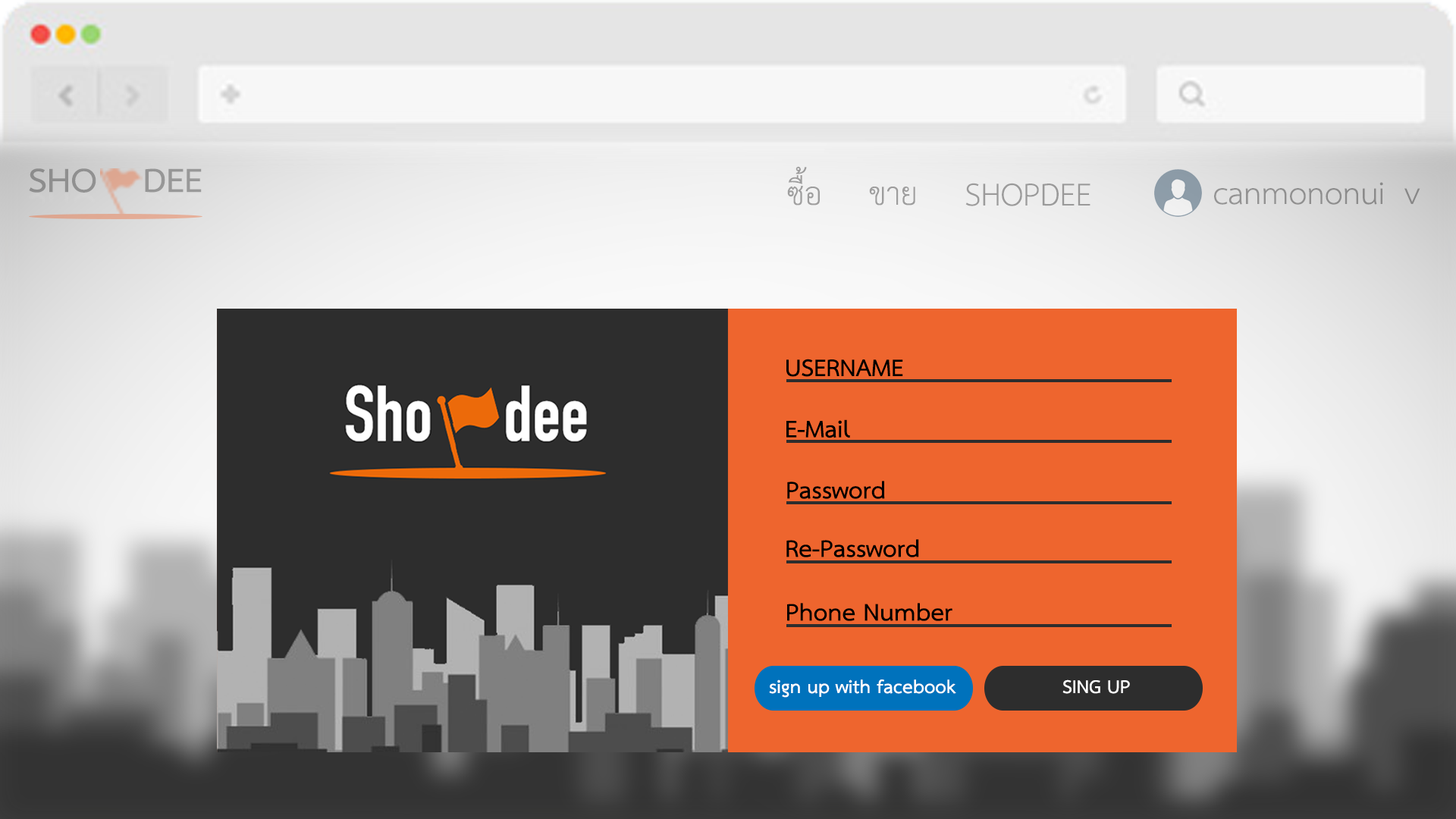
<style>
.page{position:relative;width:1456px;height:819px}
.page>*{position:absolute;margin:0}
.t1{font:48.3px "THSarabunPSK-Bold";color:#929292;scale:1.05 1}
.t2{font:45.5px "THSarabunPSK";color:#9e9e9e}
.t3{font:45.5px "THSarabunPSK";color:#9a9a9a}
.t4{font:45.5px "THSarabunPSK";color:#908f8f}
.t5{font:45.5px "THSarabunPSK";color:#9d9d9d}
.t6{font:34.4px "THSarabunPSK-Bold";color:#000000}
.t7{font:26.5px "THSarabunPSK-Bold";color:#ffffff}
</style>
<div class="page">
<p class="t1" style="left:29px;top:168px;width:173px;height:25px">SHO    DEE</p>
<p class="t2" style="left:787px;top:166px;width:33px;height:40px">ซื้อ</p>
<p class="t3" style="left:965px;top:183px;width:125px;height:23px">SHOPDEE</p>
<p class="t4" style="left:1214px;top:182px;width:206px;height:23px">canmononui  v</p>
<p class="t5" style="left:869px;top:187px;width:46px;height:19px">ขาย</p>
<p class="t6" style="left:786px;top:359px;width:117px;height:18px">USERNAME</p>
<p class="t6" style="left:786px;top:419px;width:64px;height:19px">E-Mail</p>
<p class="t6" style="left:787px;top:481px;width:98px;height:18px">Password</p>
<p class="t6" style="left:786px;top:539px;width:133px;height:18px">Re-Password</p>
<p class="t6" style="left:787px;top:603px;width:165px;height:18px">Phone Number</p>
<p class="t7" style="left:769px;top:679px;width:187px;height:19px">sign up with facebook</p>
<p class="t7" style="left:1062px;top:679px;width:68px;height:15px">SING UP</p>
</div>
